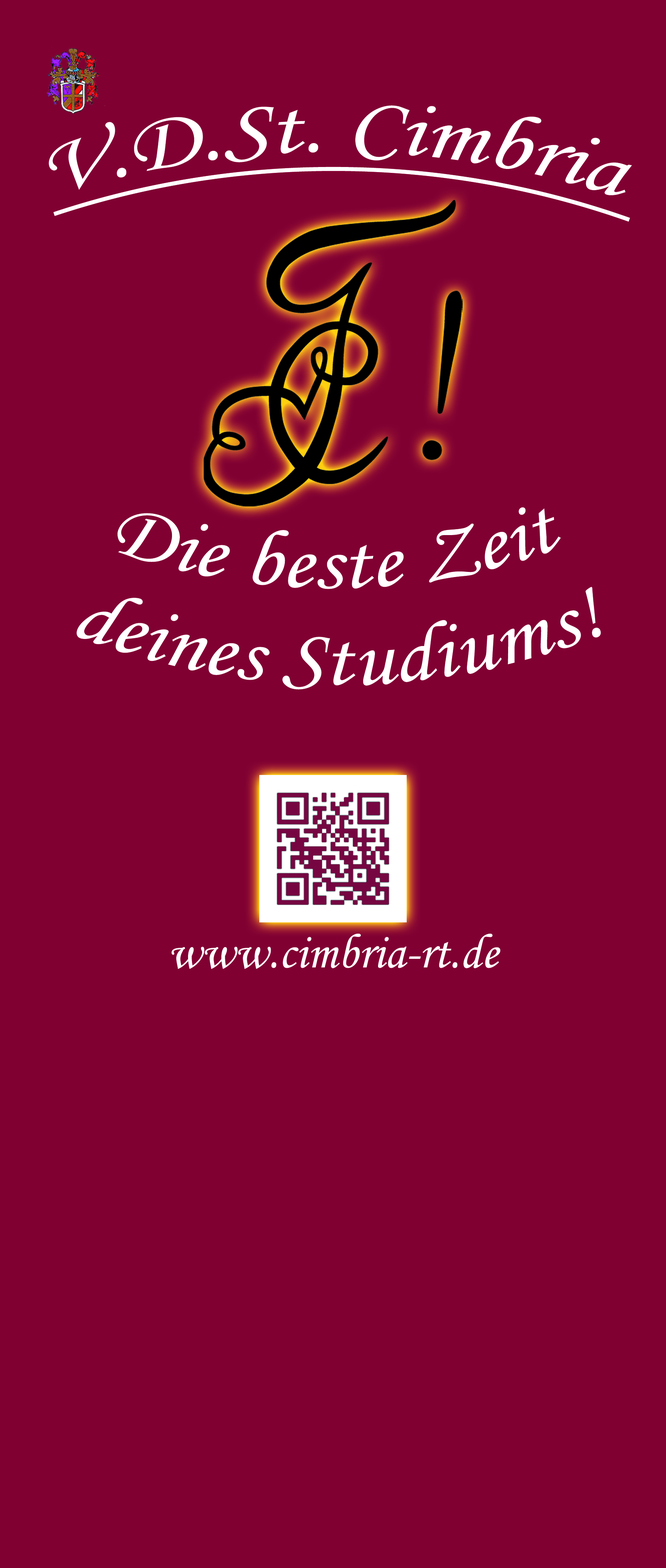
<style>
.page{position:relative;width:666px;height:1568px;background:#800032}
.page>*{position:absolute;margin:0}
.t1{font:81.7px "MonotypeCorsiva";color:#ffffff;text-decoration:underline}
.t2{font:81.7px "MonotypeCorsiva";color:#ffffff}
.t3{font:49px "MonotypeCorsiva";color:#ffffff}
</style>
<div class="page">
<p class="t1" style="left:49px;top:105px;width:583px;height:117px">V.D.St. Cimbria</p>
<p class="t2" style="left:118px;top:507px;width:443px;height:82px">Die beste Zeit</p>
<p class="t2" style="left:76px;top:587px;width:525px;height:103px">deines Studiums!</p>
<p class="t3" style="left:172px;top:933px;width:329px;height:36px">www.cimbria-rt.de</p>
</div>
